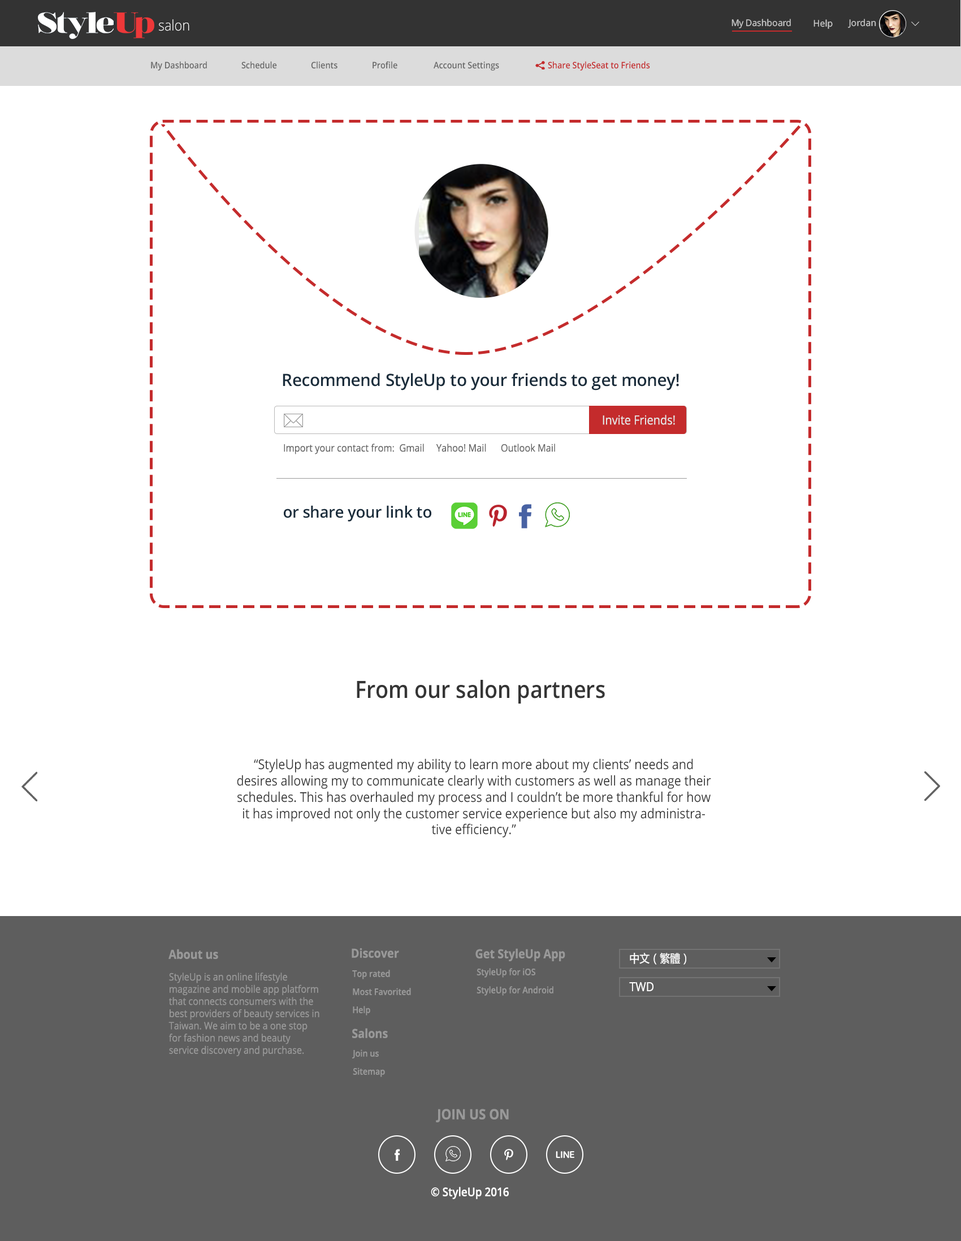
<style>
.page{position:relative;width:961px;height:1241px;background:#ffffff}
.page>*{position:absolute;margin:0}
.t1{font:14.7px "OpenSans-Light";color:#ffffff;scale:0.9 1}
.t2{font:9px "OpenSans";letter-spacing:-0.015em;color:#cccccc}
.t3{font:9px "OpenSans";color:#cccccc}
.t4{font:9px "OpenSans-Semibold";color:#666666;scale:0.9 1}
.t5{font:9px "OpenSans-Semibold";color:#c42b2c;scale:0.9 1}
.t6{font:17px "OpenSans-Semibold";letter-spacing:-0.015em;color:#192c3b}
.t7{font:12.4px "OpenSans";color:#e5e5e5;scale:0.91 1}
.t8{font:10.2px "OpenSans";color:#666666;scale:0.91 1}
.t9{font:15.8px "OpenSans-Semibold";letter-spacing:-0.015em;color:#192c3b}
.t10{font:23.7px "OpenSans-Semibold";color:#353535;scale:0.9 1}
.t11{font:13.6px "OpenSans";color:#353535;scale:0.9 1}
.t12{font:12.4px "OpenSans-Bold";color:#999999;scale:0.9 1}
.t13{font:11.3px "MicrosoftYaHei-Regular";color:#ffffff;scale:0.9 1}
.t14{font:10.2px "OpenSans";color:#999999;scale:0.9 1}
.t15{font:9px/18.1px "OpenSans-Semibold";color:#999999;scale:0.9 1}
.t16{font:12.4px "OpenSans";color:#ffffff;scale:0.9 1}
.t17{font:14.1px "OpenSans-Bold";color:#999999;scale:0.9 1}
.t18{font:11.9px "OpenSans-Semibold";color:#ffffff;scale:0.9 1}
</style>
<div class="page">
<p class="t1" style="left:159px;top:19px;width:30px;height:12px">salon</p>
<p class="t2" style="left:731px;top:19px;width:60px;height:9px">My Dashboard</p>
<p class="t3" style="left:813px;top:19px;width:19px;height:10px">Help</p>
<p class="t3" style="left:848px;top:19px;width:28px;height:9px">Jordan</p>
<p class="t4" style="left:151px;top:61px;width:56px;height:10px">My Dashboard</p>
<p class="t4" style="left:241px;top:61px;width:36px;height:8px">Schedule</p>
<p class="t4" style="left:311px;top:61px;width:26px;height:8px">Clients</p>
<p class="t4" style="left:372px;top:61px;width:25px;height:8px">Profile</p>
<p class="t4" style="left:433px;top:62px;width:66px;height:9px">Account Settings</p>
<p class="t5" style="left:548px;top:61px;width:102px;height:10px">Share StyleSeat to Friends</p>
<p class="t6" style="left:283px;top:373px;width:396px;height:18px">Recommend StyleUp to your friends to get money!</p>
<p class="t7" style="left:602px;top:415px;width:73px;height:10px">Invite Friends!</p>
<p class="t8" style="left:284px;top:444px;width:271px;height:10px">Import your contact from:  Gmail     Yahoo! Mail      Outlook Mail</p>
<p class="t9" style="left:284px;top:505px;width:147px;height:17px">or share your link to</p>
<p class="t10" style="left:357px;top:680px;width:248px;height:24px">From our salon partners</p>
<p class="t11" style="left:237px;top:758px;width:474px;height:80px;text-align:center">“StyleUp has augmented my ability to learn more about my clients’ needs and desires allowing my to communicate clearly with customers as well as manage their schedules. This has overhauled my process and I couldn’t be more thankful for how it has improved not only the customer service experience but also my administrative efficiency.”</p>
<p class="t12" style="left:168px;top:949px;width:50px;height:10px">About us</p>
<p class="t12" style="left:352px;top:948px;width:47px;height:10px">Discover</p>
<p class="t12" style="left:475px;top:948px;width:90px;height:13px">Get StyleUp App</p>
<p class="t13" style="left:630px;top:953px;width:56px;height:12px">中文（繁體）</p>
<p class="t14" style="left:168px;top:973px;width:151px;height:83px;text-align:right">StyleUp is an online lifestyle magazine and mobile app platform that connects consumers with the best providers of beauty services in Taiwan. We aim to be a one stop for fashion news and beauty service discovery and purchase.</p>
<p class="t15" style="left:352px;top:970px;width:59px;height:46px;text-align:right">Top rated<br>Most Favorited<br>Help</p>
<p class="t15" style="left:476px;top:968px;width:77px;height:28px;text-align:right">StyleUp for iOS<br>StyleUp for Android</p>
<p class="t16" style="left:629px;top:982px;width:24px;height:9px">TWD</p>
<p class="t12" style="left:352px;top:1028px;width:36px;height:10px">Salons</p>
<p class="t15" style="left:352px;top:1050px;width:33px;height:27px;text-align:right">Join us<br>Sitemap</p>
<p class="t17" style="left:436px;top:1109px;width:73px;height:13px">JOIN US ON</p>
<p class="t18" style="left:431px;top:1187px;width:78px;height:12px">© StyleUp 2016</p>
</div>
